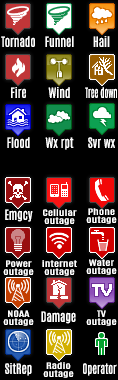
<style>
.page{position:relative;width:118px;height:380px;background:#000000}
.page>*{position:absolute;margin:0}
.t1{font:12px "Antonio-Regular";color:#ffffff;font-weight:bold}
.t2{font:12px "Antonio-Regular";color:#ffffff;font-weight:bold;scale:0.73 1}
.t3{font:7.3px/8px "Antonio-Regular";color:#ffffff;font-weight:bold;scale:1.64 1}
.t4{font:12px "Antonio-Regular";color:#ffffff;font-weight:bold;scale:0.9 1}
</style>
<div class="page">
<p class="t1" style="left:1px;top:36px;width:34px;height:11px">Tornado</p>
<p class="t1" style="left:45px;top:36px;width:29px;height:11px">Funnel</p>
<p class="t1" style="left:93px;top:36px;width:17px;height:11px">Hail</p>
<p class="t1" style="left:11px;top:87px;width:15px;height:11px">Fire</p>
<p class="t1" style="left:48px;top:87px;width:22px;height:11px">Wind</p>
<p class="t2" style="left:85px;top:87px;width:32px;height:11px">Tree down</p>
<p class="t1" style="left:7px;top:137px;width:23px;height:11px">Flood</p>
<p class="t1" style="left:45px;top:137px;width:29px;height:13px">Wx rpt</p>
<p class="t1" style="left:88px;top:137px;width:27px;height:11px">Svr wx</p>
<p class="t1" style="left:5px;top:209px;width:28px;height:13px">Emgcy</p>
<p class="t3" style="left:43px;top:209px;width:34px;height:16px;text-align:center">Cellular<br>outage</p>
<p class="t3" style="left:86px;top:208px;width:31px;height:16px;text-align:center">Phone<br>outage</p>
<p class="t3" style="left:3px;top:260px;width:31px;height:16px;text-align:center">Power<br>outage</p>
<p class="t3" style="left:42px;top:260px;width:35px;height:16px;text-align:center">internet<br>outage</p>
<p class="t3" style="left:86px;top:259px;width:31px;height:16px;text-align:center">Water<br>outage</p>
<p class="t3" style="left:3px;top:310px;width:31px;height:16px;text-align:center">NOAA<br>outage</p>
<p class="t1" style="left:41px;top:311px;width:35px;height:13px">Damage</p>
<p class="t3" style="left:86px;top:310px;width:31px;height:16px;text-align:center">TV<br>outage</p>
<p class="t1" style="left:5px;top:363px;width:27px;height:13px">SitRep</p>
<p class="t3" style="left:43px;top:362px;width:31px;height:16px;text-align:center">Radio<br>outage</p>
<p class="t4" style="left:83px;top:363px;width:34px;height:13px">Operator</p>
</div>
